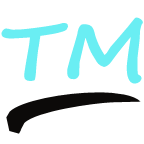
<style>
.page{position:relative;width:144px;height:144px;background:#ffffff}
.page>*{position:absolute;margin:0}
.t1{font:79.5px "SegoeScript-Bold";color:#6aeef3;scale:1.08 1}
</style>
<div class="page">
<p class="t1" style="left:1px;top:17px;width:142px;height:67px">TM</p>
</div>
